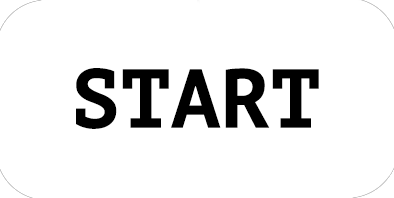
<style>
.page{position:relative;width:394px;height:198px;background:#ffffff}
.page>*{position:absolute;margin:0}
.t1{font:83.3px "PTMono-Bold";color:#000000}
</style>
<div class="page">
<p class="t1" style="left:76px;top:68px;width:243px;height:61px">START</p>
</div>
